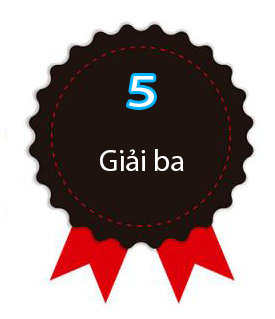
<style>
.page{position:relative;width:275px;height:319px;background:#ffffff}
.page>*{position:absolute;margin:0}
.t1{font:46.9px "MyriadPro-Regular";color:#ffffff;scale:1.33 1}
.t2{font:30px "MyriadPro-Regular";color:#ffffff}
</style>
<div class="page">
<p class="t1" style="left:128px;top:76px;width:26px;height:31px">5</p>
<p class="t2" style="left:100px;top:149px;width:84px;height:22px">Giải ba</p>
</div>
